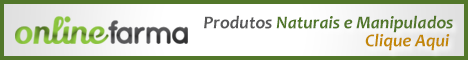
<style>
.page{position:relative;width:468px;height:60px;background:#ffffff}
.page>*{position:absolute;margin:0}
.t1{font:18px/18px "Candara-BoldItalic";color:#52772a}
.t2{font:18px/18px "Candara-BoldItalic";color:#585859}
.t3{font:18px/18px "Candara-BoldItalic";color:#c38808}
</style>
<div class="page">
<p class="t1" style="left:204px;top:15px;width:249px;height:36px;text-align:right"><span class="t2">Produtos </span>Naturais e Manipulados<br><span class="t3">Clique Aqui</span></p>
</div>
